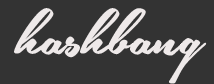
<style>
.page{position:relative;width:214px;height:84px;background:#333333}
.page>*{position:absolute;margin:0}
.t1{font:82px "SouthernAirePersonalUseOnly";color:#eee9e9}
</style>
<div class="page">
<p class="t1" style="left:14px;top:8px;width:193px;height:76px">hashbang</p>
</div>
